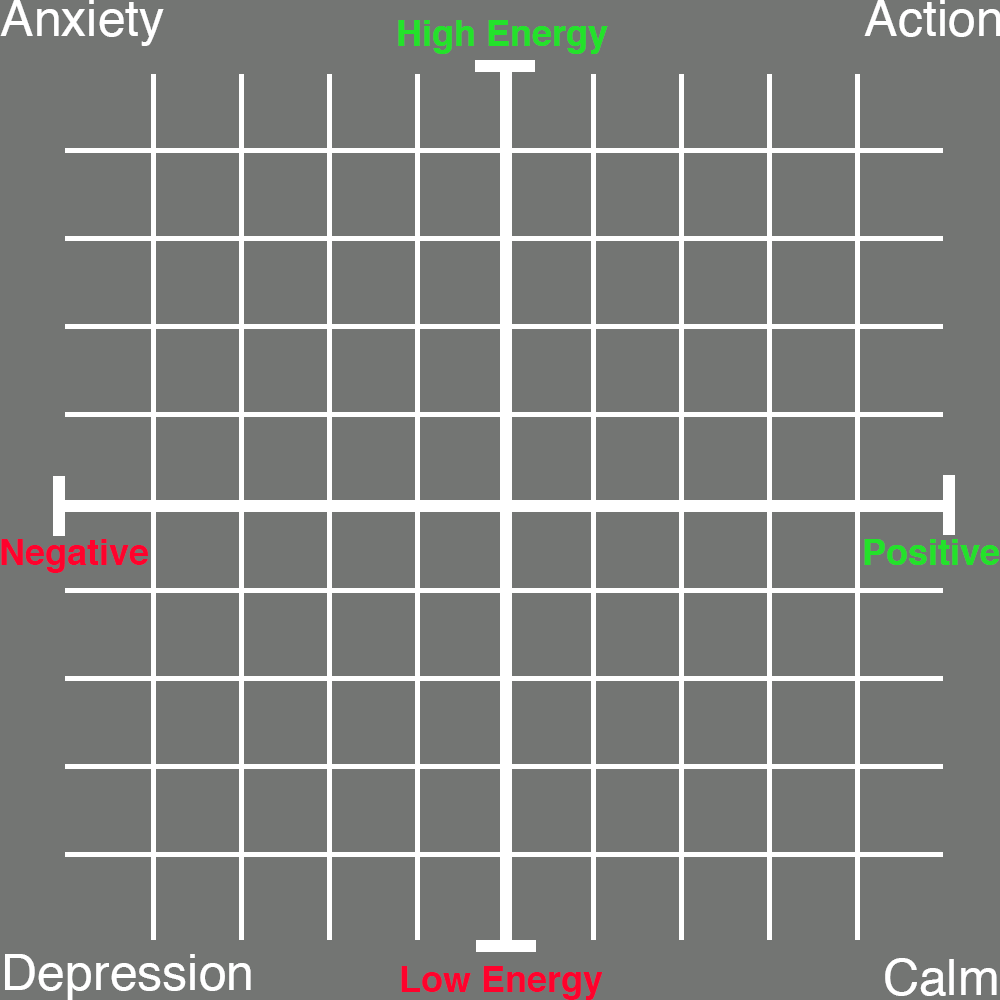
<style>
.page{position:relative;width:1000px;height:1000px;background:#737573}
.page>*{position:absolute;margin:0}
.t1{font:50px "Helvetica";color:#ffffff}
.t2{font:36px "Helvetica-Bold";color:#23e22a}
.t3{font:36px "Helvetica-Bold";color:#ff022c}
</style>
<div class="page">
<p class="t1" style="left:0px;top:0px;width:164px;height:46px">Anxiety</p>
<p class="t1" style="left:864px;top:0px;width:137px;height:37px">Action</p>
<p class="t2" style="left:398px;top:20px;width:210px;height:34px">High Energy</p>
<p class="t3" style="left:1px;top:539px;width:147px;height:34px">Negative</p>
<p class="t2" style="left:864px;top:539px;width:135px;height:26px">Positive</p>
<p class="t1" style="left:5px;top:954px;width:246px;height:46px">Depression</p>
<p class="t3" style="left:401px;top:966px;width:202px;height:34px">Low Energy</p>
<p class="t1" style="left:885px;top:958px;width:112px;height:38px">Calm</p>
</div>
